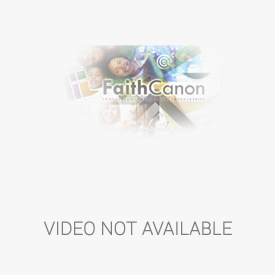
<style>
.page{position:relative;width:275px;height:275px;background:#f7f7f7}
.page>*{position:absolute;margin:0}
.t1{font:18px "Roboto-Thin";color:#7e7e7e;text-transform:uppercase;font-weight:bold}
</style>
<div class="page">
<p class="t1" style="left:44px;top:221px;width:188px;height:15px">VIDEO NOT available</p>
</div>
